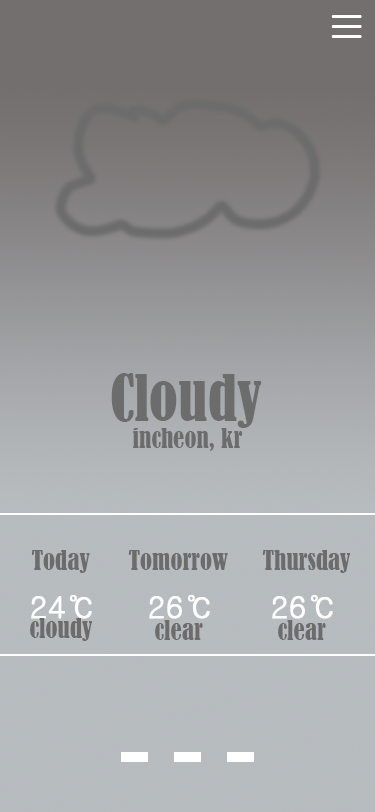
<style>
.page{position:relative;width:375px;height:812px}
.page>*{position:absolute;margin:0}
.t1{font:60px/10px "Gulim";color:#ffffff}
.t2{font:60px "BernardMT-Condensed";color:#6c6c6c}
.t3{font:25px "BernardMT-Condensed";color:#6c6c6c}
.t4{font:30px "Gulim";color:#ffffff;font-weight:bold}
</style>
<div class="page">
<p class="t1" style="left:331px;top:15px;width:31px;height:23px">-<br>-<br>-</p>
<p class="t2" style="left:111px;top:373px;width:151px;height:55px">Cloudy</p>
<p class="t3" style="left:133px;top:428px;width:110px;height:23px">incheon, kr</p>
<p class="t3" style="left:31px;top:550px;width:59px;height:23px">Today</p>
<p class="t3" style="left:128px;top:550px;width:100px;height:20px">Tomorrow</p>
<p class="t3" style="left:262px;top:550px;width:88px;height:23px">Thursday</p>
<p class="t4" style="left:31px;top:595px;width:61px;height:24px">24℃</p>
<p class="t4" style="left:149px;top:595px;width:61px;height:24px">26℃</p>
<p class="t4" style="left:272px;top:595px;width:61px;height:24px">26℃</p>
<p class="t3" style="left:30px;top:618px;width:62px;height:23px">cloudy</p>
<p class="t3" style="left:155px;top:620px;width:48px;height:20px">clear</p>
<p class="t3" style="left:278px;top:620px;width:48px;height:20px">clear</p>
</div>
